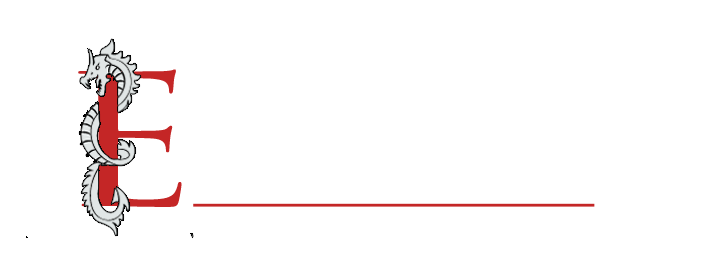
<style>
.page{position:relative;width:706px;height:260px;background:#ffffff}
.page>*{position:absolute;margin:0}
.t1{font:179.1px "TrajanPro-Regular";color:#c42626;scale:1.3 1}
</style>
<div class="page">
<p class="t1" style="left:78px;top:69px;width:104px;height:138px">E</p>
</div>
